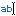
<style>
.page{position:relative;width:16px;height:16px;background:#ffffff}
.page>*{position:absolute;margin:0}
.t1{font:10px "Arial-BoldMT";color:#206aa3}
</style>
<div class="page">
<p class="t1" style="left:1px;top:5px;width:11px;height:7px">ab</p>
</div>
